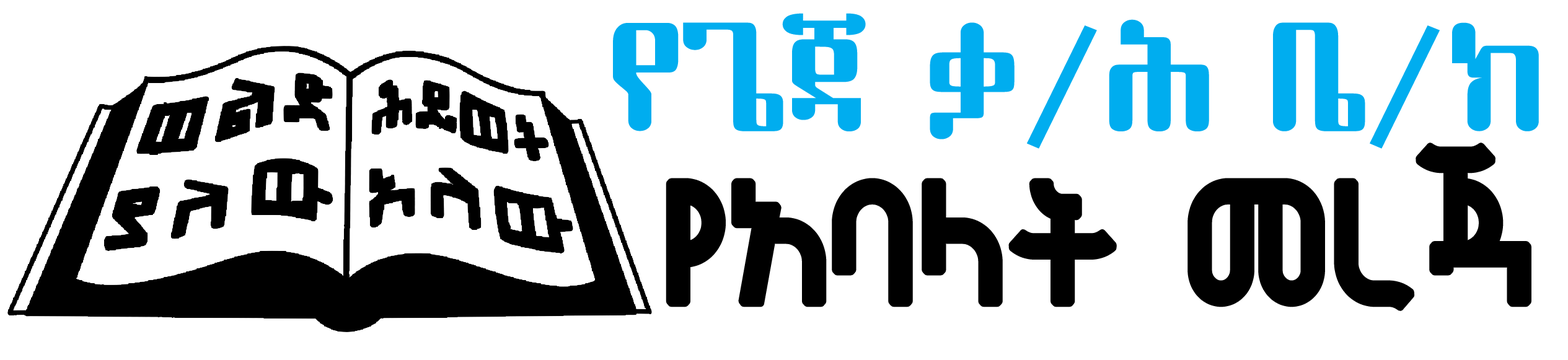
<style>
.page{position:relative;width:1568px;height:360px;background:#ffffff}
.page>*{position:absolute;margin:0}
.t1{font:143.4px "EthiopicYebse";letter-spacing:-0.04em;color:#00adef;scale:1.07 1}
.t2{font:161.2px "KanaNikodimos";letter-spacing:-0.04em;color:#000000;font-weight:bold;scale:0.9 1}
</style>
<div class="page">
<p class="t1" style="left:613px;top:13px;width:926px;height:136px">የጌጃ ቃ/ሕ ቤ/ክ</p>
<p class="t2" style="left:669px;top:146px;width:859px;height:162px">የአባላት መረጃ</p>
</div>
